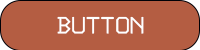
<style>
.page{position:relative;width:200px;height:50px;background:#b45d42}
.page>*{position:absolute;margin:0}
.t1{font:30px "3270Condensed";color:#ffffff}
</style>
<div class="page">
<p class="t1" style="left:57px;top:16px;width:87px;height:18px">BUTTON</p>
</div>
